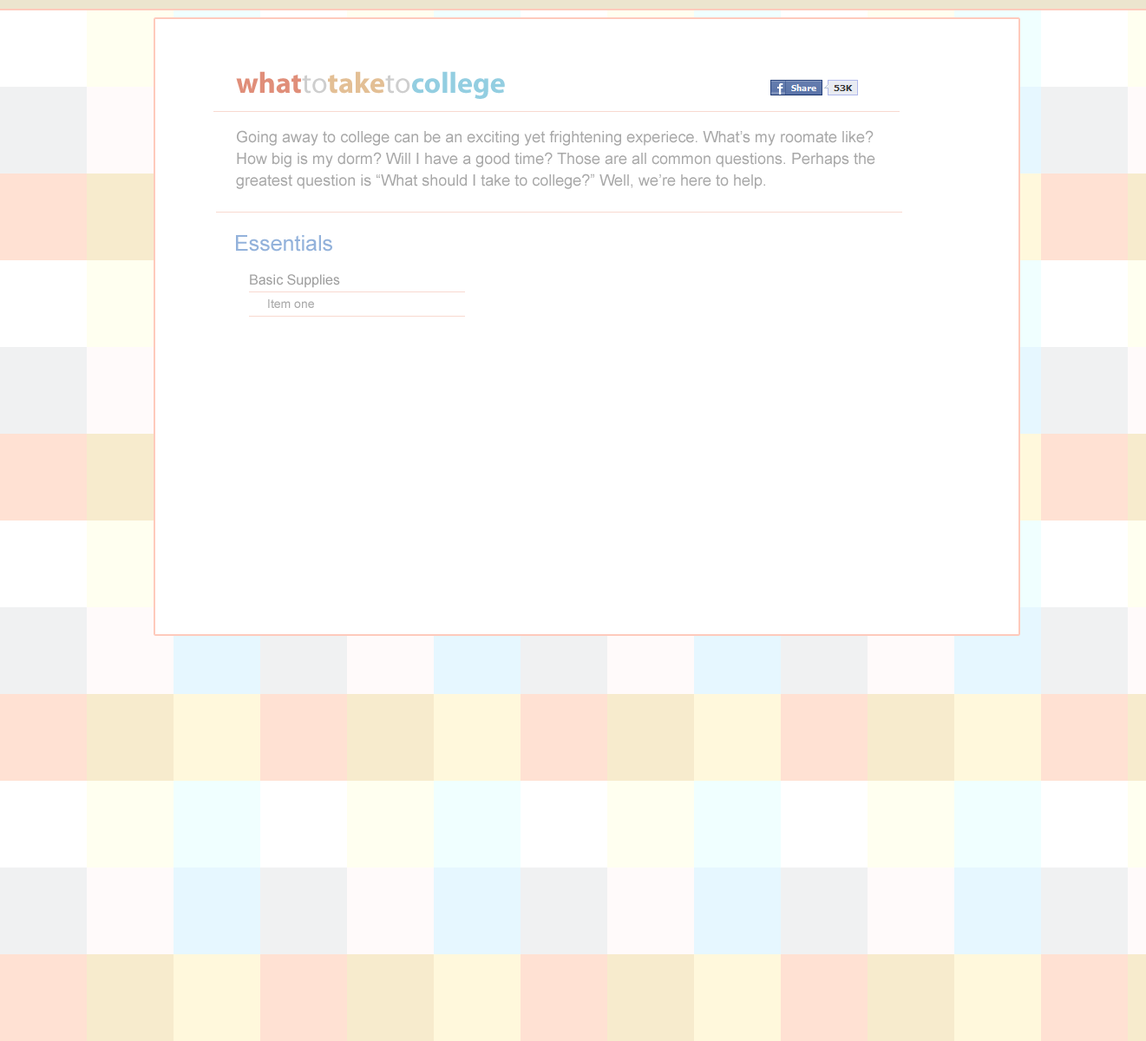
<style>
.page{position:relative;width:1146px;height:1041px;background:#ffffff}
.page>*{position:absolute;margin:0}
.t1{font:29.5px "MyriadPro-Bold";color:#93cee1}
.t2{font:29.5px "MyriadPro-Bold";color:#e08e79}
.t3{font:29.5px "MyriadPro-Regular";color:#cecece}
.t4{font:29.5px "MyriadPro-Bold";color:#e3bf95}
.t5{font:15.6px/21.7px "ArialMT";color:#a8a8a8}
.t6{font:21.7px "ArialMT";color:#93b2db}
.t7{font:13.9px "ArialMT";color:#a0a0a0}
.t8{font:12.1px "ArialMT";color:#aaaaaa}
</style>
<div class="page">
<p class="t1" style="left:236px;top:71px;width:269px;height:28px"><span class="t2">what</span><span class="t3">to</span><span class="t4">take</span><span class="t3">to</span>college</p>
<p class="t5" style="left:236px;top:130px;width:639px;height:59px">Going away to college can be an exciting yet frightening experiece. What’s my roomate like? How big is my dorm? Will I have a good time? Those are all common questions. Perhaps the greatest question is “What should I take to college?” Well, we’re here to help.</p>
<p class="t6" style="left:236px;top:235px;width:96px;height:17px">Essentials</p>
<p class="t7" style="left:250px;top:274px;width:90px;height:14px">Basic Supplies</p>
<p class="t8" style="left:268px;top:299px;width:46px;height:9px">Item one</p>
</div>
